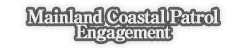
<style>
.page{position:relative;width:247px;height:48px;background:#ffffff}
.page>*{position:absolute;margin:0}
.t1{font:18px/15px "RyuminPro-ExBold";letter-spacing:-0.08em;color:#ededed;font-weight:bold}
</style>
<div class="page">
<p class="t1" style="left:28px;top:9px;width:191px;height:33px;text-align:center">Mainland Coastal Patrol<br>Engagement</p>
</div>
